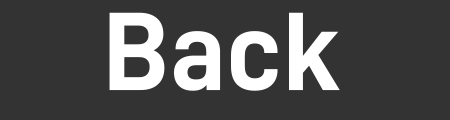
<style>
.page{position:relative;width:450px;height:120px;background:#333333}
.page>*{position:absolute;margin:0}
.t1{font:111.9px "D-DIN-Bold";color:#ffffff}
</style>
<div class="page">
<p class="t1" style="left:109px;top:12px;width:231px;height:79px">Back</p>
</div>
